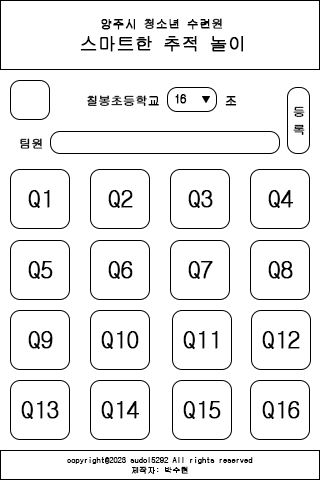
<style>
.page{position:relative;width:320px;height:480px;background:#ffffff}
.page>*{position:absolute;margin:0}
.t1{font:12px "GulimChe";color:#000000;font-weight:bold}
.t2{font:18px "GulimChe";color:#000000;font-weight:bold}
.t3{font:12px/18px "GulimChe";color:#000000;font-weight:bold}
.t4{font:24px "GulimChe";color:#000000;font-weight:bold}
.t5{font:8px/10px "GulimChe";color:#000000;font-weight:bold}
</style>
<div class="page">
<p class="t1" style="left:101px;top:18px;width:122px;height:12px">양주시 청소년 수련원</p>
<p class="t2" style="left:80px;top:36px;width:163px;height:16px">스마트한 추적 놀이</p>
<p class="t1" style="left:87px;top:95px;width:72px;height:11px">칠봉초등학교</p>
<p class="t1" style="left:175px;top:94px;width:12px;height:10px">16</p>
<p class="t1" style="left:225px;top:96px;width:12px;height:10px">조</p>
<p class="t3" style="left:293px;top:106px;width:12px;height:29px">등<br>록</p>
<p class="t1" style="left:20px;top:138px;width:23px;height:11px">팀원</p>
<p class="t4" style="left:28px;top:190px;width:22px;height:18px">Q1</p>
<p class="t4" style="left:108px;top:190px;width:25px;height:18px">Q2</p>
<p class="t4" style="left:188px;top:190px;width:25px;height:18px">Q3</p>
<p class="t4" style="left:268px;top:190px;width:26px;height:18px">Q4</p>
<p class="t4" style="left:28px;top:261px;width:25px;height:18px">Q5</p>
<p class="t4" style="left:108px;top:261px;width:25px;height:18px">Q6</p>
<p class="t4" style="left:188px;top:261px;width:25px;height:18px">Q7</p>
<p class="t4" style="left:268px;top:261px;width:25px;height:18px">Q8</p>
<p class="t4" style="left:28px;top:331px;width:25px;height:18px">Q9</p>
<p class="t4" style="left:101px;top:331px;width:38px;height:18px">Q10</p>
<p class="t4" style="left:183px;top:331px;width:35px;height:18px">Q11</p>
<p class="t4" style="left:262px;top:331px;width:38px;height:18px">Q12</p>
<p class="t4" style="left:21px;top:401px;width:38px;height:18px">Q13</p>
<p class="t4" style="left:101px;top:401px;width:39px;height:18px">Q14</p>
<p class="t4" style="left:183px;top:401px;width:38px;height:18px">Q15</p>
<p class="t4" style="left:262px;top:401px;width:38px;height:18px">Q16</p>
<p class="t5" style="left:67px;top:457px;width:186px;height:17px;text-align:center">copyright©2023 sudol5292 All rights reserved<br>제작자: 박수현</p>
</div>
